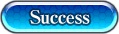
<style>
.page{position:relative;width:119px;height:34px}
.page>*{position:absolute;margin:0}
.t1{font:18px "RyuminPro-ExBold";letter-spacing:-0.04em;color:#fffffa}
</style>
<div class="page">
<p class="t1" style="left:30px;top:10px;width:60px;height:14px">Success</p>
</div>
